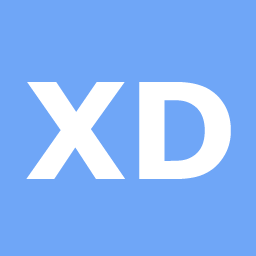
<style>
.page{position:relative;width:256px;height:256px;background:#6fa6f7}
.page>*{position:absolute;margin:0}
.t1{font:133.3px "Verdana-Bold";color:#ffffff}
</style>
<div class="page">
<p class="t1" style="left:26px;top:82px;width:205px;height:97px">XD</p>
</div>
